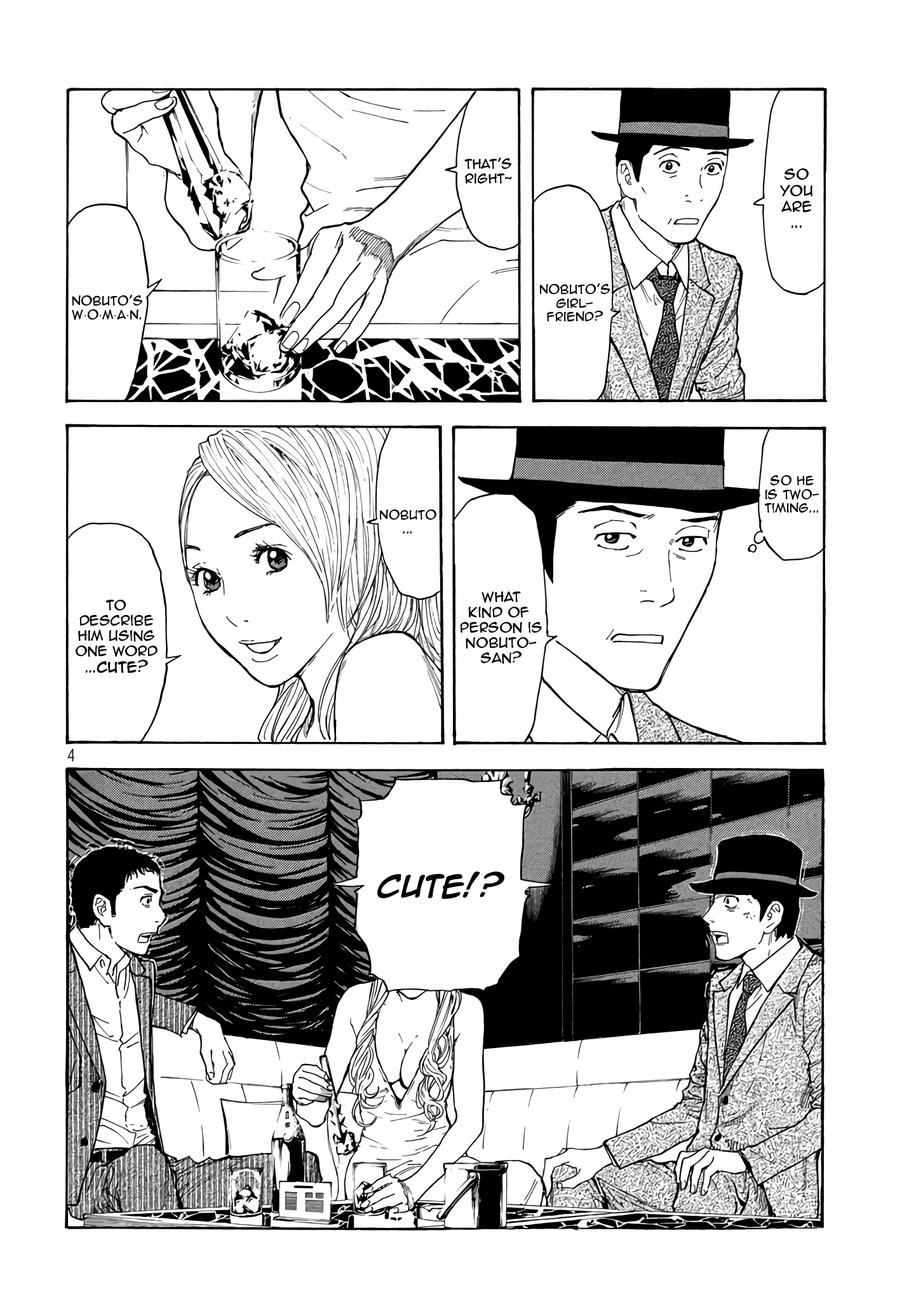
<style>
.page{position:relative;width:916px;height:1301px;background:#ffffff}
.page>*{position:absolute;margin:0}
.t1{font:12.1px "AnimeAce2.0BB";color:#000000}
.t2{font:13.3px "AnimeAce2.0BB";color:#000000}
.t3{font:11.4px "AnimeAce2.0BB";color:#000000}
.t4{font:11.4px "TimesNewRomanPSMT";color:#000000}
.t5{font:12.7px "AnimeAce2.0BB";color:#000000}
.t6{font:13.3px "AnimeAce2.0BB";color:#000000;font-weight:bold}
.t7{font:14px "AnimeAce2.0BB";color:#000000}
.t8{font:26.1px "AnimeAce2.0BB-Bold";color:#000000}
</style>
<div class="page">
<p class="t1" style="left:465px;top:158px;width:47px;height:26px;text-align:center">That’s<br>Right~</p>
<p class="t2" style="left:780px;top:168px;width:33px;height:60px;text-align:center">so<br>you<br>are<br>...</p>
<p class="t3" style="left:539px;top:283px;width:71px;height:39px;text-align:center">nobuto’s<br>girl-<br>friend?</p>
<p class="t3" style="left:72px;top:295px;width:70px;height:25px;text-align:center">Nobuto’s<br>W<span class="t4">·</span>O<span class="t4">·</span>M<span class="t4">·</span>a<span class="t4">·</span>N.</p>
<p class="t3" style="left:765px;top:475px;width:54px;height:38px;text-align:center">So he<br>is two-<br>timing...</p>
<p class="t3" style="left:380px;top:510px;width:57px;height:24px;text-align:center">Nobuto<br>...</p>
<p class="t5" style="left:460px;top:592px;width:82px;height:72px;text-align:center">WHat<br>kind of <br>person is<br>Nobuto-<br>san?</p>
<p class="t5" style="left:76px;top:600px;width:82px;height:74px;text-align:center">To<br>describe<br>him using<br>one word<br>...<span class="t6">cute</span><span class="t7">?</span></p>
<p class="t8" style="left:377px;top:872px;width:128px;height:27px">CUTE!?</p>
</div>
